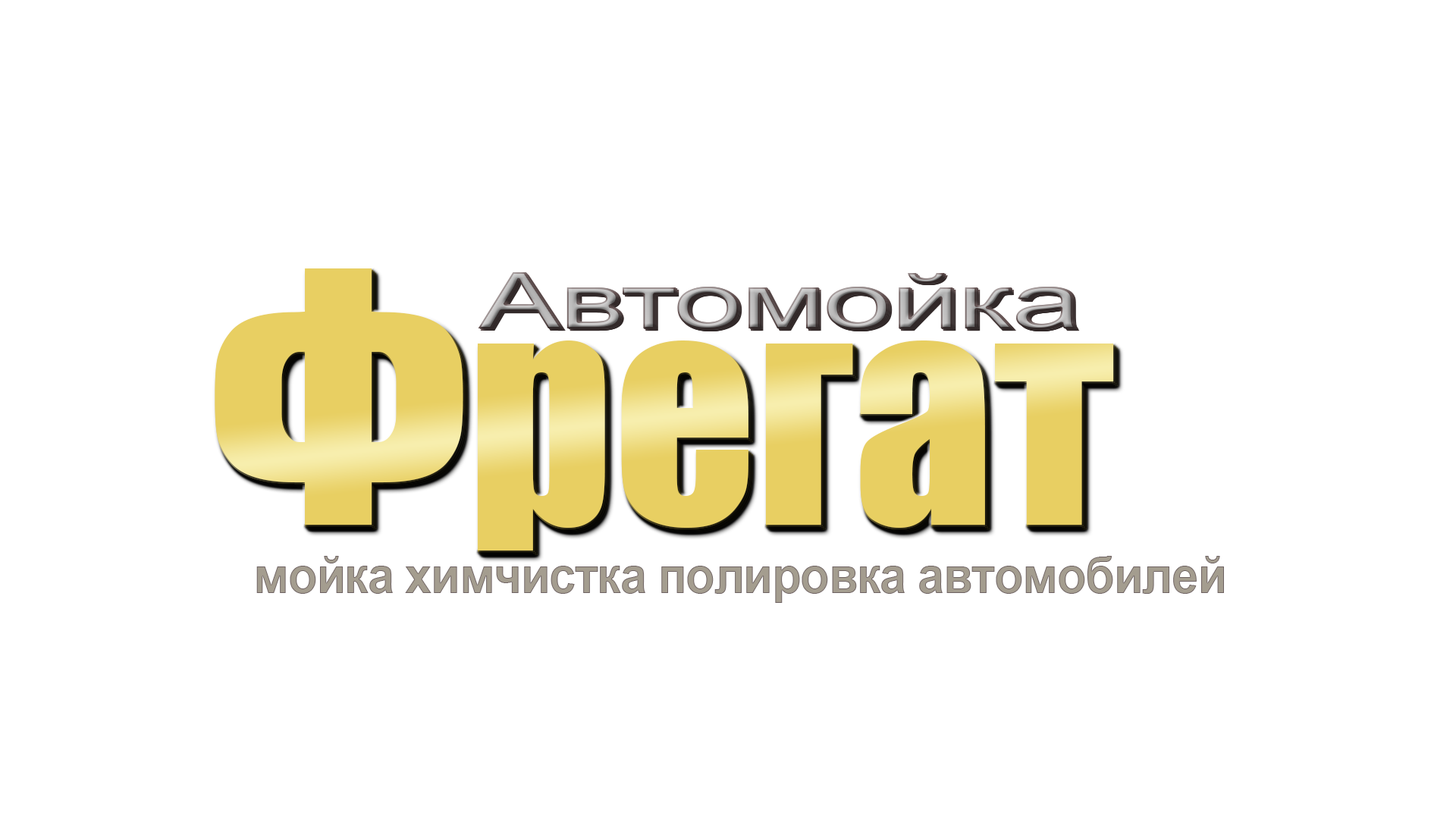
<style>
.page{position:relative;width:1456px;height:819px;background:#ffffff}
.page>*{position:absolute;margin:0}
.t1{font:280.2px "Impact"}
.t2{font:323.6px "Impact"}
.t3{font:78.2px "ArialMT";letter-spacing:-0.02em;scale:1.59 1}
.t4{font:50.6px "ArialNarrow-Bold";letter-spacing:-0.02em;color:#a49d8f;scale:1.16 1}
</style>
<div class="page">
<p class="t1" style="left:215px;top:270px;width:899px;height:282px"><span class="t2">Ф</span>регат</p>
<p class="t1" style="left:215px;top:268px;width:899px;height:283px"><span class="t2">Ф</span>регат</p>
<p class="t1" style="left:216px;top:270px;width:899px;height:282px"><span class="t2">Ф</span>регат</p>
<p class="t1" style="left:216px;top:271px;width:899px;height:283px"><span class="t2">Ф</span>регат</p>
<p class="t1" style="left:218px;top:273px;width:899px;height:282px"><span class="t2">Ф</span>регат</p>
<p class="t1" style="left:218px;top:271px;width:899px;height:283px"><span class="t2">Ф</span>регат</p>
<p class="t1" style="left:219px;top:273px;width:900px;height:282px"><span class="t2">Ф</span>регат</p>
<p class="t3" style="left:478px;top:272px;width:598px;height:57px">Автомойка</p>
<p class="t3" style="left:479px;top:273px;width:599px;height:57px">Автомойка</p>
<p class="t3" style="left:479px;top:272px;width:599px;height:57px">Автомойка</p>
<p class="t3" style="left:480px;top:275px;width:599px;height:56px">Автомойка</p>
<p class="t3" style="left:480px;top:275px;width:599px;height:56px">Автомойка</p>
<p class="t3" style="left:480px;top:273px;width:599px;height:57px">Автомойка</p>
<p class="t3" style="left:482px;top:275px;width:598px;height:56px">Автомойка</p>
<p class="t4" style="left:256px;top:556px;width:968px;height:47px">мойка химчистка полировка автомобилей</p>
</div>
